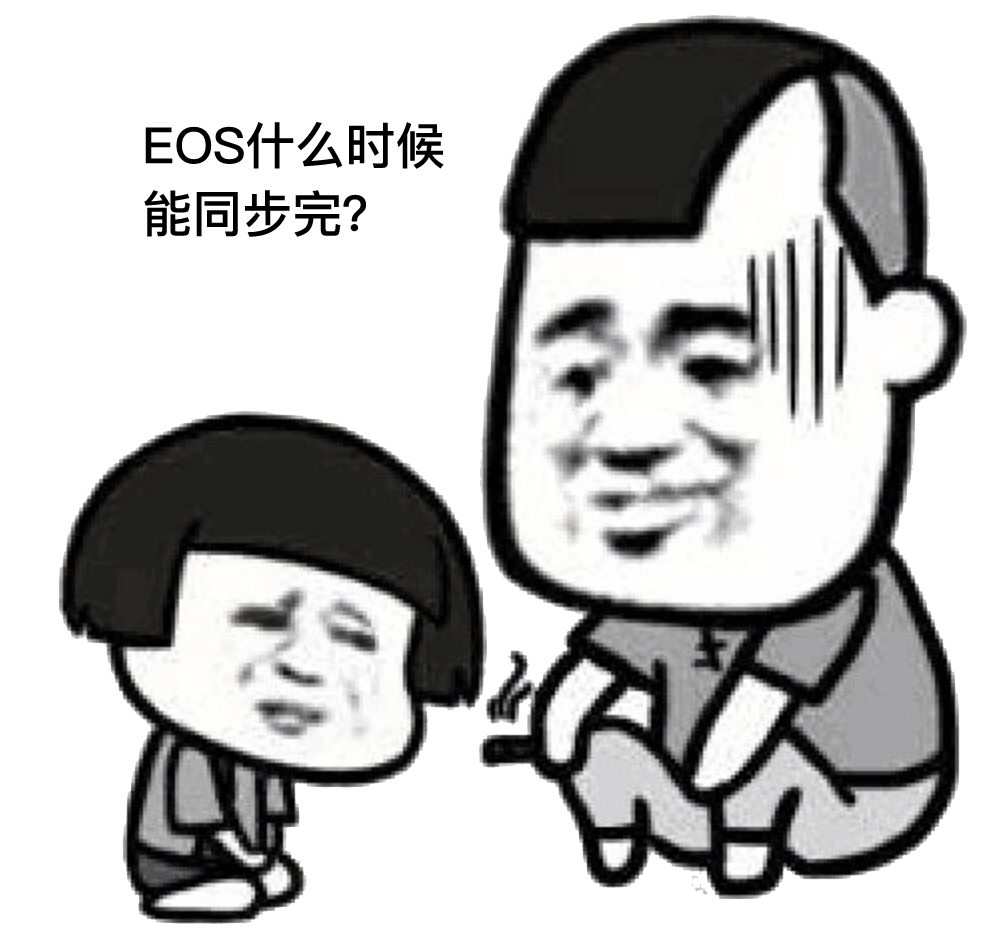
<style>
.page{position:relative;width:989px;height:940px;background:#ffffff}
.page>*{position:absolute;margin:0}
.t1{font:50px/68px "PingFangSC-Medium";color:#000000}
</style>
<div class="page">
<p class="t1" style="left:144px;top:122px;width:300px;height:115px">EOS什么时候<br>能同步完？</p>
</div>
